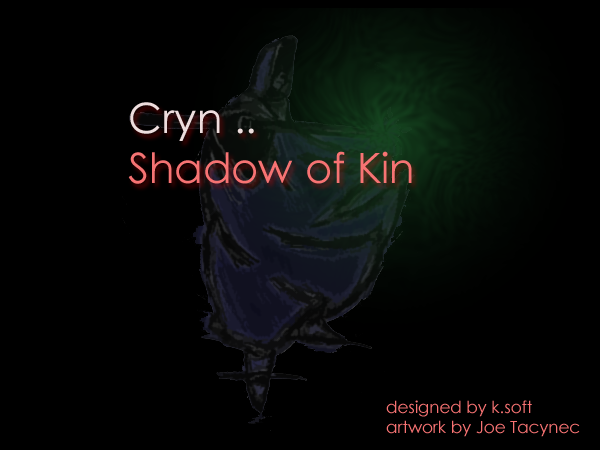
<style>
.page{position:relative;width:600px;height:450px;background:#000000}
.page>*{position:absolute;margin:0}
.t1{font:41.7px "CenturyGothic";color:#f77373}
.t2{font:41.7px "CenturyGothic";color:#eedede}
.t3{font:16.7px "CenturyGothic";color:#f77373}
</style>
<div class="page">
<p class="t1" style="left:128px;top:102px;width:284px;height:82px"><span class="t2">Cryn ..<br></span>Shadow of Kin</p>
<p class="t3" style="left:386px;top:400px;width:194px;height:37px">designed by k.soft<br>artwork by Joe Tacynec</p>
</div>
